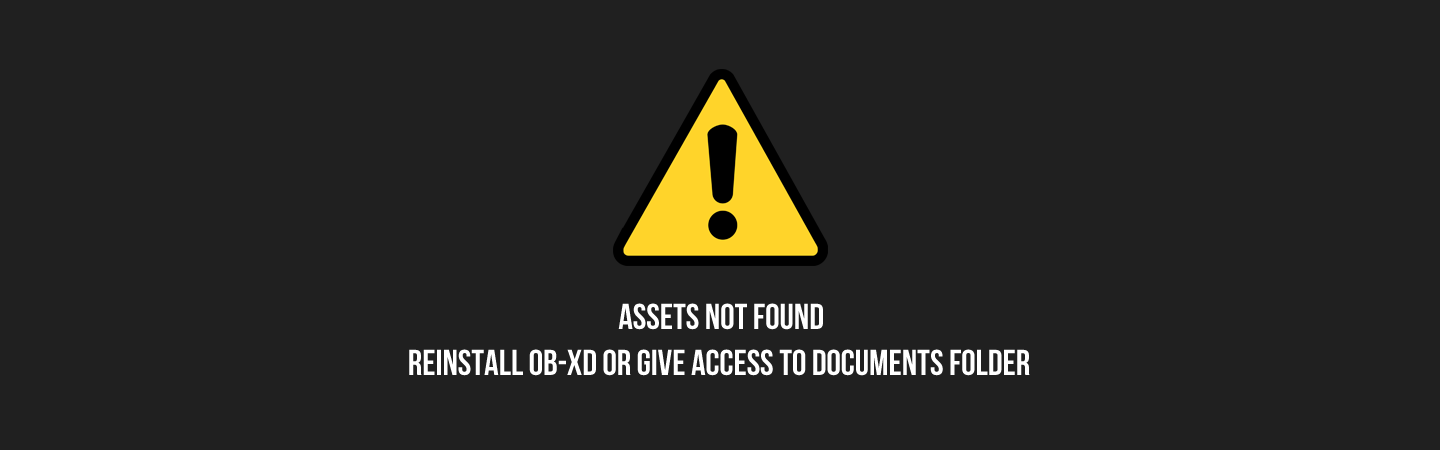
<style>
.page{position:relative;width:1440px;height:450px;background:#202020}
.page>*{position:absolute;margin:0}
.t1{font:36px "BebasNeue-Bold";color:#ffffff}
</style>
<div class="page">
<p class="t1" style="left:618px;top:303px;width:205px;height:27px">ASSETS NOT FOUND</p>
<p class="t1" style="left:409px;top:349px;width:621px;height:27px">REINSTALL OB-XD OR GIVE ACCESS TO DOCUMENTS FOLDER</p>
</div>
